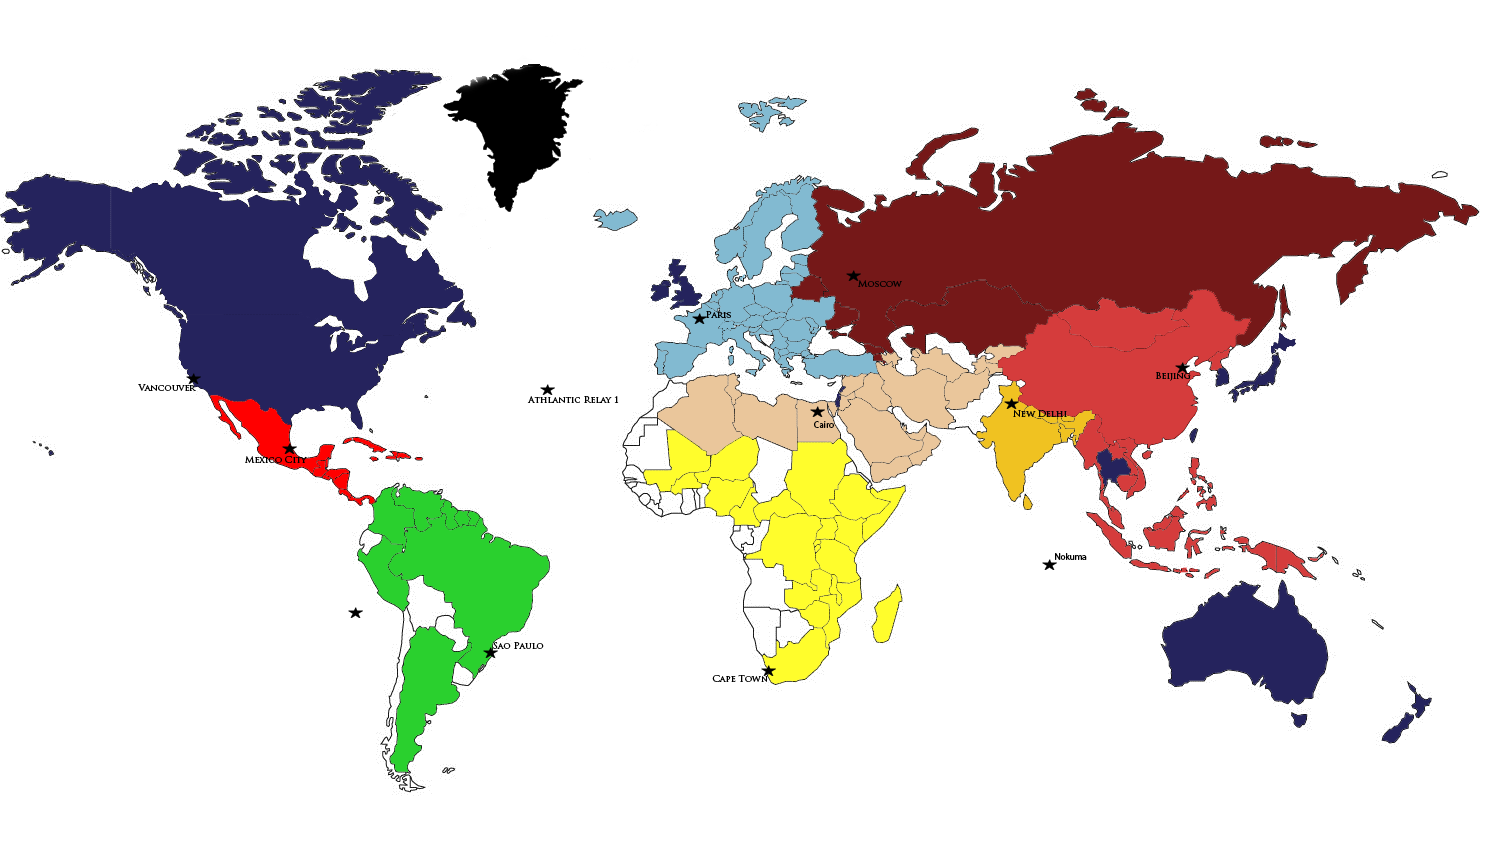
<style>
.page{position:relative;width:1506px;height:857px;background:#ffffff}
.page>*{position:absolute;margin:0}
.t1{font:9px "TrajanPro-Regular";color:#000000}
.t2{font:9px "MyriadPro-Regular";color:#000000}
</style>
<div class="page">
<p class="t1" style="left:858px;top:280px;width:44px;height:7px">Moscow</p>
<p class="t1" style="left:706px;top:311px;width:25px;height:7px">Paris</p>
<p class="t1" style="left:1156px;top:372px;width:35px;height:9px">Beijing</p>
<p class="t1" style="left:138px;top:384px;width:58px;height:7px">Vancouver</p>
<p class="t1" style="left:527px;top:396px;width:92px;height:7px">Athlantic Relay 1</p>
<p class="t1" style="left:1013px;top:410px;width:54px;height:7px">New Delhi</p>
<p class="t2" style="left:814px;top:421px;width:20px;height:7px">Cairo</p>
<p class="t1" style="left:245px;top:456px;width:62px;height:7px">Mexico City</p>
<p class="t2" style="left:1055px;top:553px;width:32px;height:7px">Nokuma</p>
<p class="t1" style="left:493px;top:642px;width:51px;height:7px">Sao Paulo</p>
<p class="t1" style="left:712px;top:675px;width:56px;height:7px">Cape Town</p>
</div>
